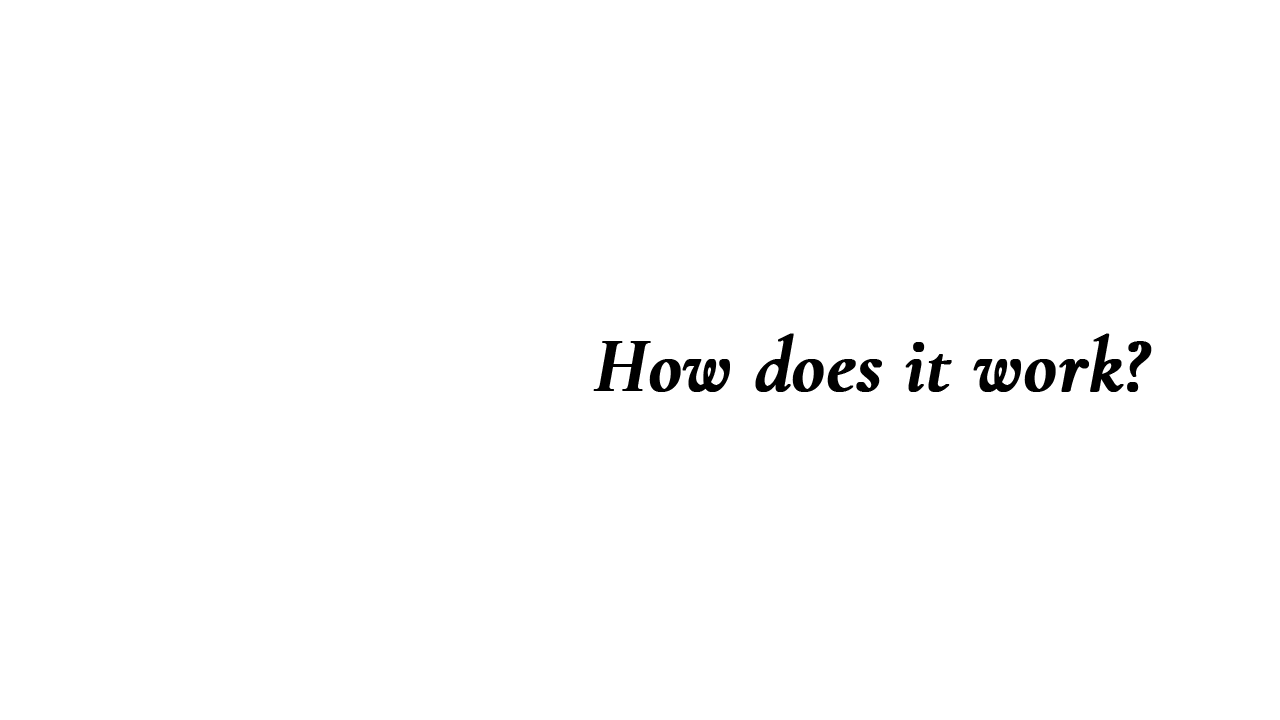
<style>
.page{position:relative;width:1280px;height:720px;background:#ffffff}
.page>*{position:absolute;margin:0}
.t1{font:78.9px "CormorantGaramond-BoldItalic";color:#000000;font-weight:bold}
</style>
<div class="page">
<p class="t1" style="left:593px;top:333px;width:559px;height:59px">How does it work?</p>
</div>
